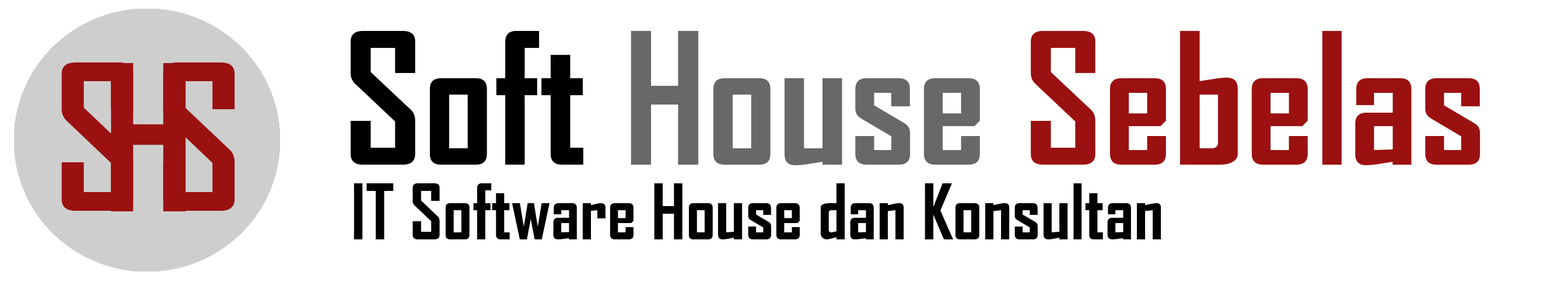
<style>
.page{position:relative;width:1568px;height:296px;background:#ffffff}
.page>*{position:absolute;margin:0}
.t1{font:175px "AgencyFB-Bold";color:#9b1010}
.t2{font:175px "AgencyFB-Bold";color:#000000}
.t3{font:175px "AgencyFB-Bold";color:#686868}
.t4{font:194.4px "AgencyFB-Bold";color:#9b1010}
.t5{font:72.9px "AgencyFB-Bold";color:#000000}
</style>
<div class="page">
<p class="t1" style="left:351px;top:31px;width:1129px;height:134px"><span class="t2">Soft </span><span class="t3">House </span>Sebelas</p>
<p class="t4" style="left:61px;top:62px;width:73px;height:149px">S</p>
<p class="t4" style="left:111px;top:63px;width:75px;height:148px">H</p>
<p class="t4" style="left:163px;top:62px;width:72px;height:149px">S</p>
<p class="t5" style="left:354px;top:183px;width:807px;height:56px">IT Software House dan Konsultan</p>
</div>
